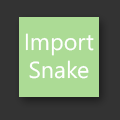
<style>
.page{position:relative;width:120px;height:120px;background:#333333}
.page>*{position:absolute;margin:0}
.t1{font:23.3px "SegoeWP";color:#ffffff}
</style>
<div class="page">
<p class="t1" style="left:25px;top:33px;width:69px;height:46px;text-align:center">Import<br>Snake</p>
</div>
